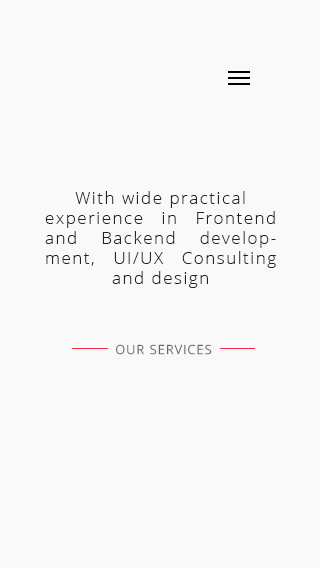
<style>
.page{position:relative;width:320px;height:568px;background:#f9f9f9}
.page>*{position:absolute;margin:0}
.t1{font:16.7px "OpenSans-Light";letter-spacing:0.1em;color:#222222}
.t2{font:12.5px "OpenSans-Light";letter-spacing:0.1em;color:#666666}
</style>
<div class="page">
<p class="t1" style="left:45px;top:191px;width:231px;height:97px;text-align:justify">With wide practical<br>experience in Frontend and Backend development, UI/UX Consulting and design</p>
<p class="t2" style="left:116px;top:344px;width:96px;height:11px">OUR SERVICES</p>
</div>
